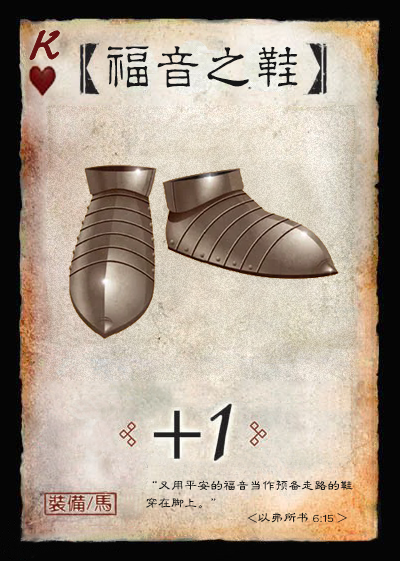
<style>
.page{position:relative;width:400px;height:561px}
.page>*{position:absolute;margin:0}
.t1{font:50px "Jxixinkai";color:#661213;font-weight:bold;font-style:italic}
.t2{font:50px "¾­µä·±½ÇÁ¥ Regular";color:#161616}
.t3{font:13px/17.5px "FZLBJW--GB1-0";color:#161616}
.t4{font:13px "FZLBJW--GB1-0";color:#161616}
</style>
<div class="page">
<p class="t1" style="left:30px;top:30px;width:30px;height:30px">K</p>
<p class="t2" style="left:107px;top:46px;width:191px;height:42px">福音之鞋</p>
<p class="t3" style="left:146px;top:480px;width:207px;height:29px">“又用平安的福音当作预备走路的鞋<br>穿在脚上。”</p>
<p class="t4" style="left:247px;top:512px;width:100px;height:11px">&lt;以弗所书 6:15 &gt;</p>
</div>
